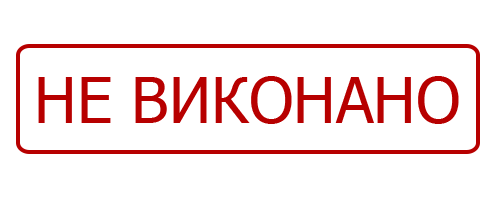
<style>
.page{position:relative;width:490px;height:200px;background:#ffffff}
.page>*{position:absolute;margin:0}
.t1{font:63.2px "Tahoma";color:#b70000}
</style>
<div class="page">
<p class="t1" style="left:38px;top:76px;width:421px;height:48px">НЕ ВИКОНАНО</p>
</div>
